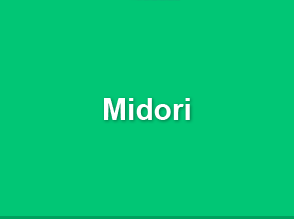
<style>
.page{position:relative;width:294px;height:219px;background:#01c675}
.page>*{position:absolute;margin:0}
.t1{font:30px "Arial-BoldMT";color:#ffffff}
</style>
<div class="page">
<p class="t1" style="left:104px;top:98px;width:86px;height:22px">Midori</p>
</div>
